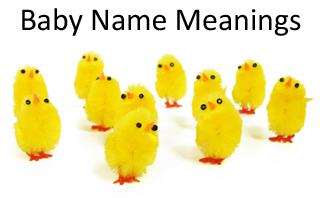
<style>
.page{position:relative;width:320px;height:198px;background:#ffffff}
.page>*{position:absolute;margin:0}
.t1{font:32px "Calibri";color:#000000}
</style>
<div class="page">
<p class="t1" style="left:22px;top:8px;width:279px;height:28px">Baby Name Meanings</p>
</div>
